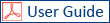
<style>
.page{position:relative;width:110px;height:23px;background:#ffffff}
.page>*{position:absolute;margin:0}
.t1{font:17px "Calibri";color:#053e7e}
</style>
<div class="page">
<p class="t1" style="left:28px;top:5px;width:75px;height:12px">User Guide</p>
</div>
